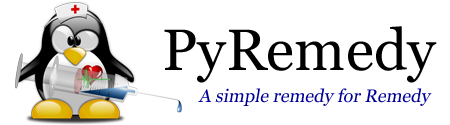
<style>
.page{position:relative;width:450px;height:125px;background:#ffffff}
.page>*{position:absolute;margin:0}
.t1{font:58.1px "Georgia";color:#000000}
.t2{font:18.1px "Georgia";color:#000096;font-style:italic}
</style>
<div class="page">
<p class="t1" style="left:164px;top:26px;width:273px;height:57px">PyRemedy</p>
<p class="t2" style="left:198px;top:88px;width:234px;height:18px">A simple remedy for Remedy</p>
</div>
